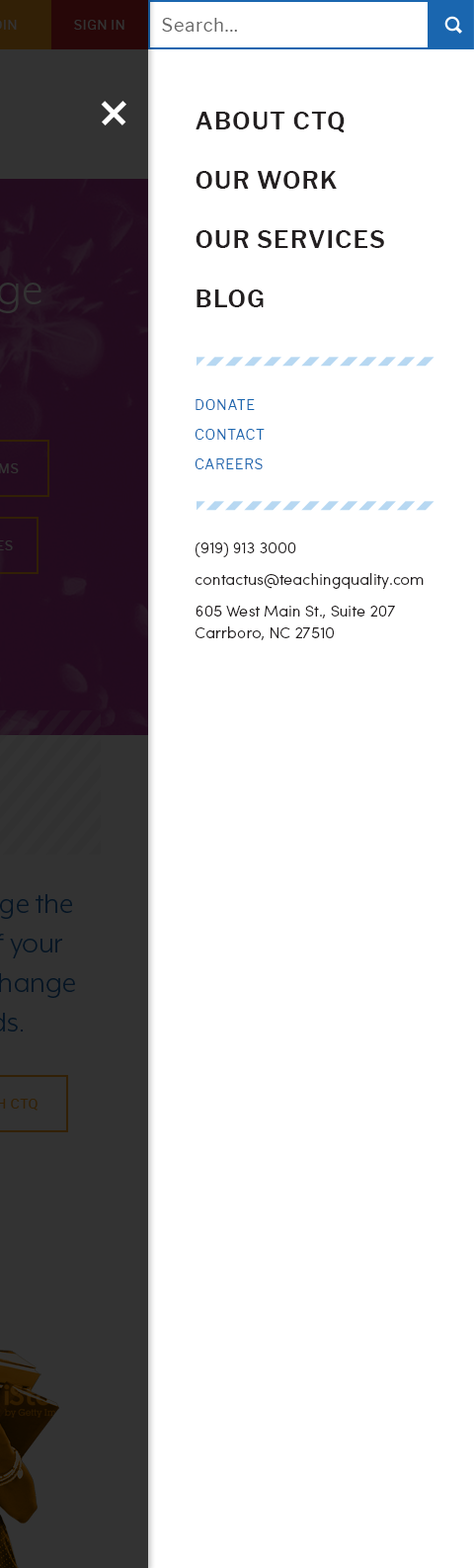
<style>
.page{position:relative;width:474px;height:1568px;background:#ffffff}
.page>*{position:absolute;margin:0}
.t1{font:17.8px "LibreFranklin-Regular";letter-spacing:0.05em;color:#666666}
.t2{font:23.7px/59.3px "LibreFranklin-SemiBold";letter-spacing:0.05em;color:#231f20}
.t3{font:13.8px/29.6px "LibreFranklin-Light";letter-spacing:0.05em;color:#1a66af}
.t4{font:15.8px/21.7px "SofiaProLight";color:#231f20}
</style>
<div class="page">
<p class="t1" style="left:162px;top:18px;width:75px;height:14px">Search...</p>
<p class="t2" style="left:196px;top:112px;width:188px;height:195px">ABOUT CTQ     <br>OUR WORK     <br>OUR SERVICES     <br>BLOG</p>
<p class="t3" style="left:195px;top:399px;width:70px;height:70px">DONATE     <br>CONTACT     <br>CAREERS</p>
<p class="t4" style="left:196px;top:542px;width:228px;height:98px">(919) 913 3000<br>contactus@teachingquality.com<br>605 West Main St., Suite 207<br>Carrboro, NC 27510</p>
</div>
